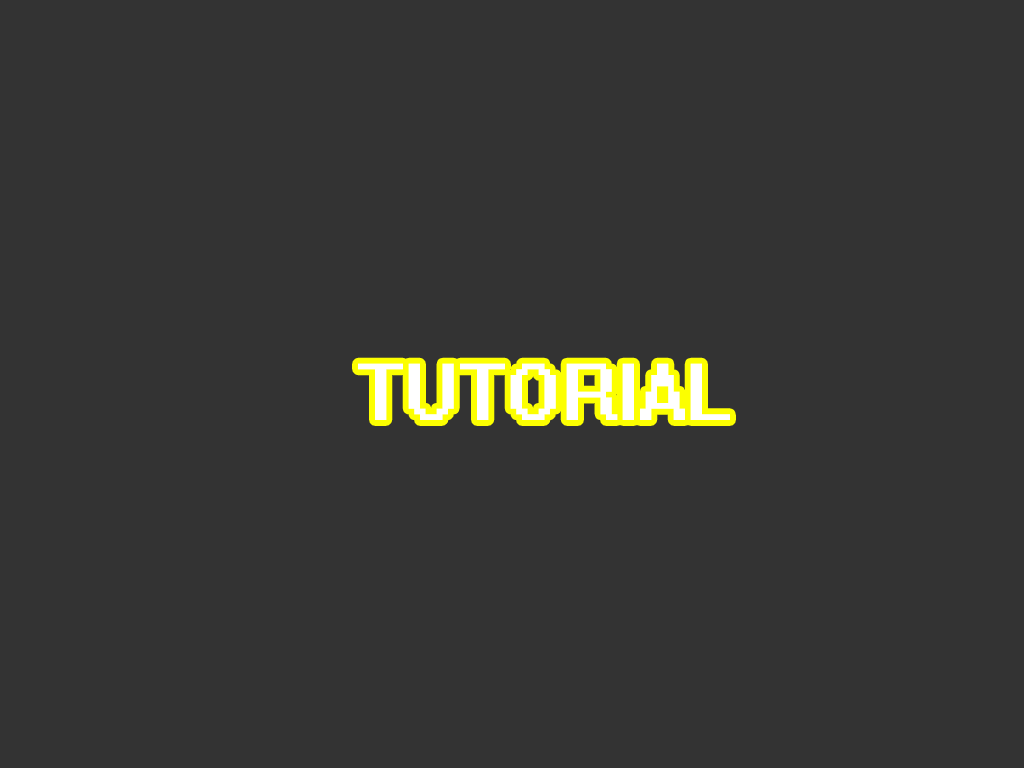
<style>
.page{position:relative;width:1024px;height:768px;background:#333333}
.page>*{position:absolute;margin:0}
.t1{font:72px "System";color:#ffffff}
</style>
<div class="page">
<p class="t1" style="left:358px;top:363px;width:372px;height:57px">TUTORIAL</p>
</div>
